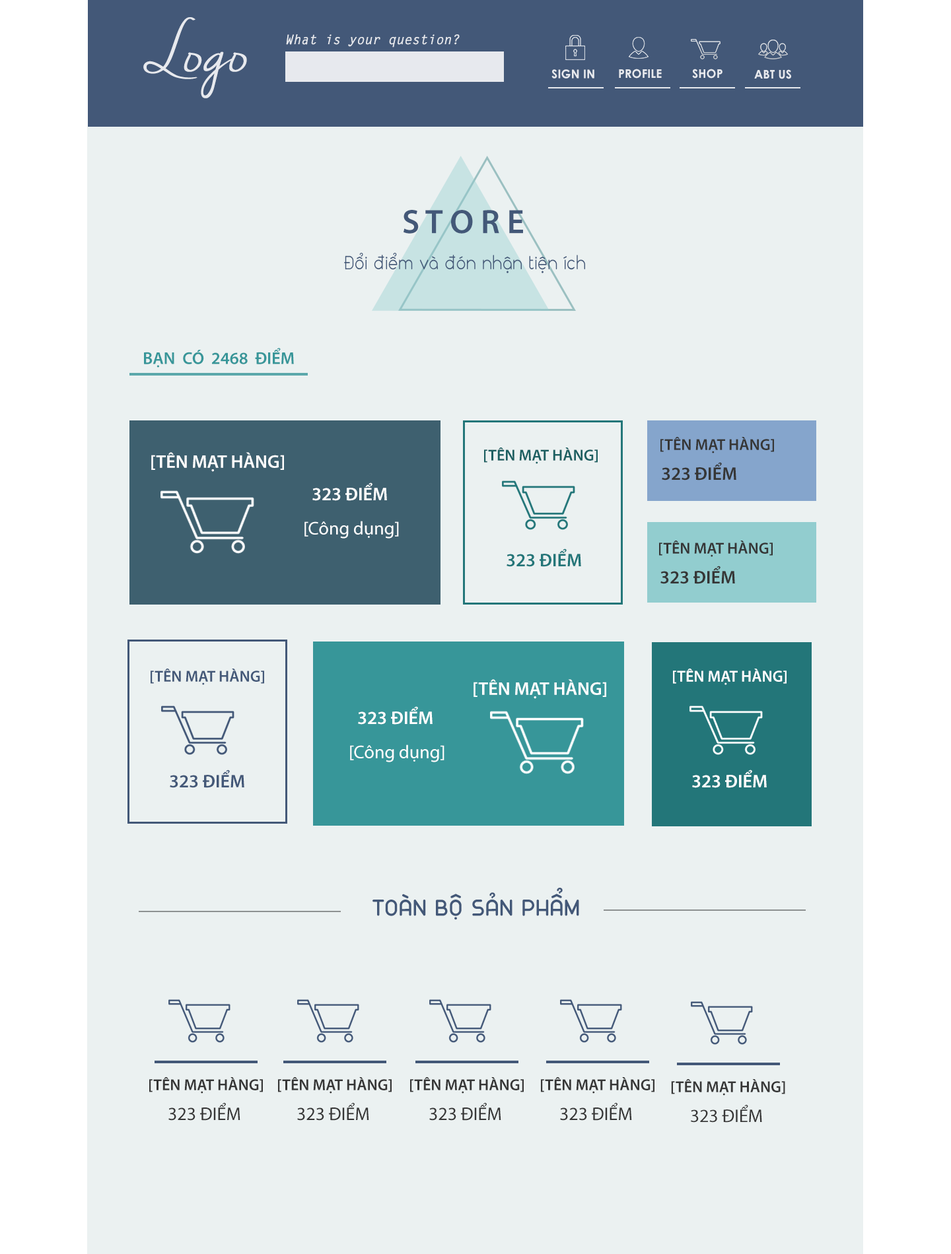
<style>
.page{position:relative;width:951px;height:1254px;background:#ebf1f1}
.page>*{position:absolute;margin:0}
.t1{font:63px "NellaSueDemo";color:#ffffff}
.t2{font:13.2px "LetterGothicStd-BoldSlanted";color:#ffffff}
.t3{font:11.9px "CenturyGothic-Bold";color:#ffffff}
.t4{font:34px "MyriadPro-Semibold";color:#435878}
.t5{font:19.1px "FS-Nokio-Regular";color:#435878;scale:0.87 1}
.t6{font:17.1px "MyriadPro-Semibold";color:#379699}
.t7{font:15.8px "MyriadPro-Semibold";color:#363636}
.t8{font:15.8px "MyriadPro-Semibold";color:#1b5f61}
.t9{font:18.5px "MyriadPro-Semibold";color:#ffffff}
.t10{font:18.5px "MyriadPro-Semibold";color:#363636}
.t11{font:18.5px "MyriadPro-Regular";color:#ffffff}
.t12{font:18.5px "MyriadPro-Semibold";color:#237679}
.t13{font:15.8px "MyriadPro-Semibold";color:#435878}
.t14{font:15.8px "MyriadPro-Semibold";color:#ffffff}
.t15{font:18.5px "MyriadPro-Semibold";color:#435878}
.t16{font:23.1px "FS-Nokio-Bold";color:#435878}
.t17{font:18.5px "MyriadPro-Regular";color:#363636}
</style>
<div class="page">
<p class="t1" style="left:143px;top:17px;width:104px;height:81px">Logo</p>
<p class="t2" style="left:286px;top:34px;width:173px;height:14px">What is your question?</p>
<p class="t3" style="left:551px;top:69px;width:43px;height:10px">SIGN IN</p>
<p class="t3" style="left:619px;top:69px;width:42px;height:10px">PROFILE</p>
<p class="t3" style="left:692px;top:69px;width:30px;height:10px">SHOP</p>
<p class="t3" style="left:754px;top:69px;width:37px;height:10px">ABT US</p>
<p class="t4" style="left:403px;top:210px;width:120px;height:24px">S T O R E</p>
<p class="t5" style="left:344px;top:253px;width:241px;height:20px">Đổi điểm và đón nhận tiện ích</p>
<p class="t6" style="left:144px;top:348px;width:150px;height:20px">BẠN  CÓ  2468  ĐIỂM</p>
<p class="t7" style="left:660px;top:437px;width:114px;height:17px">[TÊN MẠT HÀNG]</p>
<p class="t8" style="left:484px;top:448px;width:113px;height:16px">[TÊN MẠT HÀNG]</p>
<p class="t9" style="left:151px;top:452px;width:133px;height:20px">[TÊN MẠT HÀNG]</p>
<p class="t10" style="left:661px;top:462px;width:75px;height:19px">323 ĐIỂM</p>
<p class="t9" style="left:312px;top:483px;width:75px;height:18px">323 ĐIỂM</p>
<p class="t11" style="left:304px;top:521px;width:95px;height:18px">[Công dụng]</p>
<p class="t7" style="left:659px;top:541px;width:113px;height:16px">[TÊN MẠT HÀNG]</p>
<p class="t12" style="left:506px;top:549px;width:75px;height:18px">323 ĐIỂM</p>
<p class="t10" style="left:660px;top:566px;width:75px;height:18px">323 ĐIỂM</p>
<p class="t13" style="left:151px;top:669px;width:113px;height:16px">[TÊN MẠT HÀNG]</p>
<p class="t14" style="left:673px;top:669px;width:113px;height:16px">[TÊN MẠT HÀNG]</p>
<p class="t9" style="left:473px;top:679px;width:133px;height:20px">[TÊN MẠT HÀNG]</p>
<p class="t9" style="left:358px;top:706px;width:74px;height:19px">323 ĐIỂM</p>
<p class="t11" style="left:350px;top:745px;width:94px;height:18px">[Công dụng]</p>
<p class="t15" style="left:170px;top:770px;width:74px;height:18px">323 ĐIỂM</p>
<p class="t9" style="left:692px;top:770px;width:74px;height:18px">323 ĐIỂM</p>
<p class="t16" style="left:372px;top:888px;width:207px;height:32px">TOÀN BỘ SẢN PHẨM</p>
<p class="t7" style="left:149px;top:1077px;width:114px;height:17px">[TÊN MẠT HÀNG]</p>
<p class="t7" style="left:278px;top:1077px;width:113px;height:17px">[TÊN MẠT HÀNG]</p>
<p class="t7" style="left:410px;top:1077px;width:114px;height:17px">[TÊN MẠT HÀNG]</p>
<p class="t7" style="left:541px;top:1077px;width:113px;height:17px">[TÊN MẠT HÀNG]</p>
<p class="t7" style="left:671px;top:1079px;width:114px;height:17px">[TÊN MẠT HÀNG]</p>
<p class="t17" style="left:168px;top:1103px;width:72px;height:18px">323 ĐIỂM</p>
<p class="t17" style="left:297px;top:1103px;width:72px;height:18px">323 ĐIỂM</p>
<p class="t17" style="left:429px;top:1103px;width:72px;height:18px">323 ĐIỂM</p>
<p class="t17" style="left:560px;top:1103px;width:72px;height:18px">323 ĐIỂM</p>
<p class="t17" style="left:691px;top:1105px;width:71px;height:18px">323 ĐIỂM</p>
</div>
